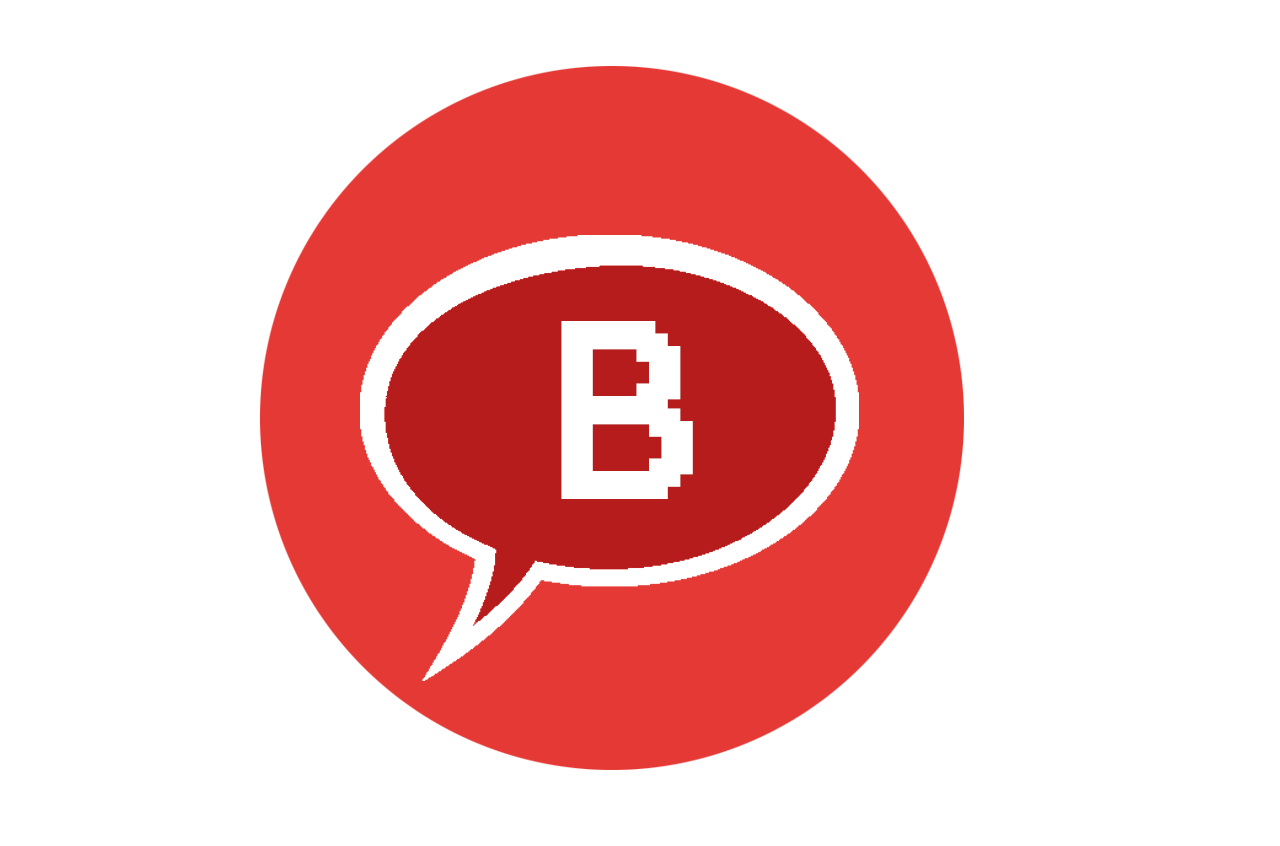
<style>
.page{position:relative;width:1280px;height:846px;background:#ffffff}
.page>*{position:absolute;margin:0}
.t1{font:200px "Terminal";color:#ffffff;font-weight:bold}
</style>
<div class="page">
<p class="t1" style="left:561px;top:321px;width:132px;height:178px">B</p>
</div>
